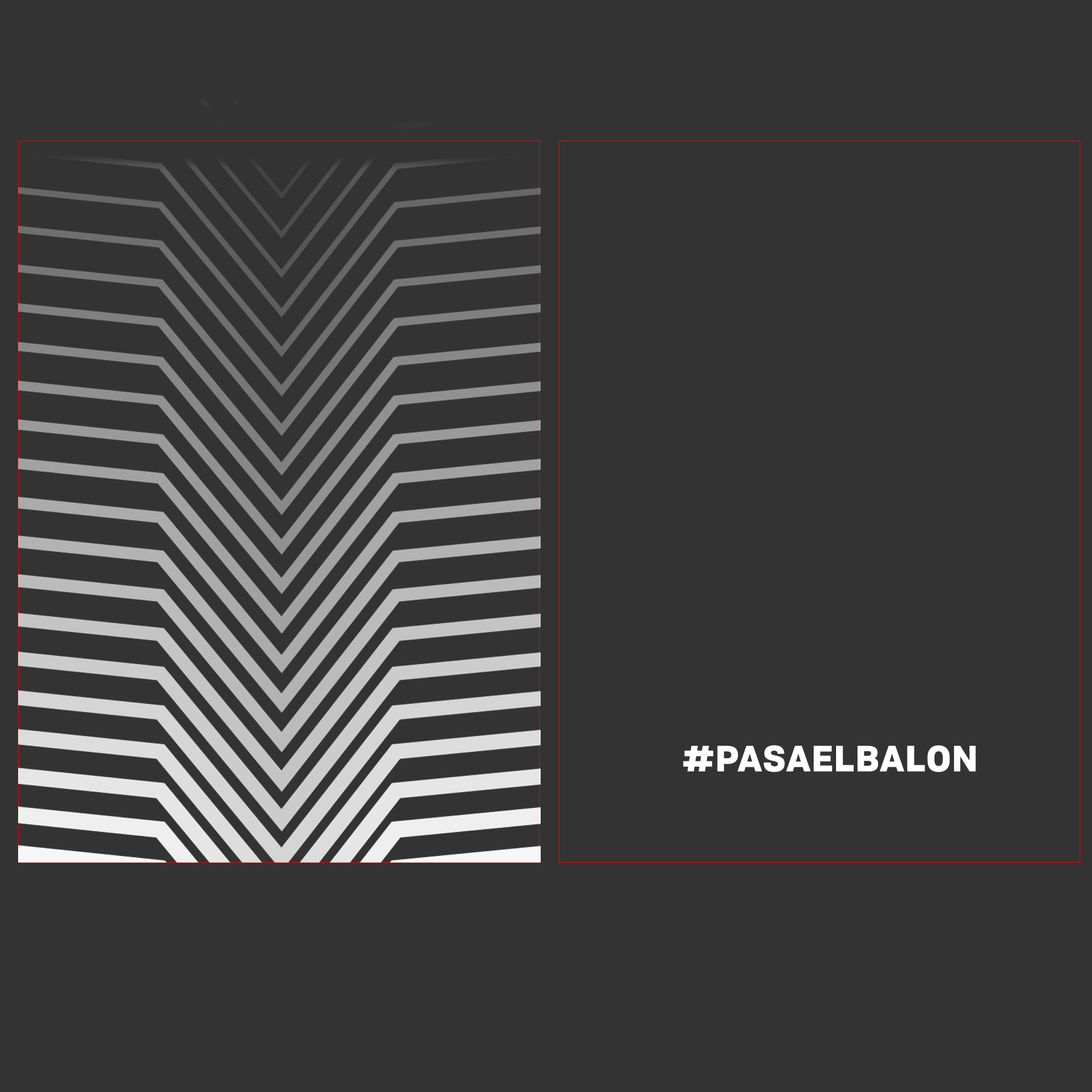
<style>
.page{position:relative;width:1092px;height:1092px;background:#333333}
.page>*{position:absolute;margin:0}
.t1{font:35.5px "SharpGrotesk-SemiBold20";letter-spacing:0.04em;color:#ffffff;text-transform:uppercase}
</style>
<div class="page">
<p class="t1" style="left:683px;top:745px;width:293px;height:27px">#PASAELBALON</p>
</div>
